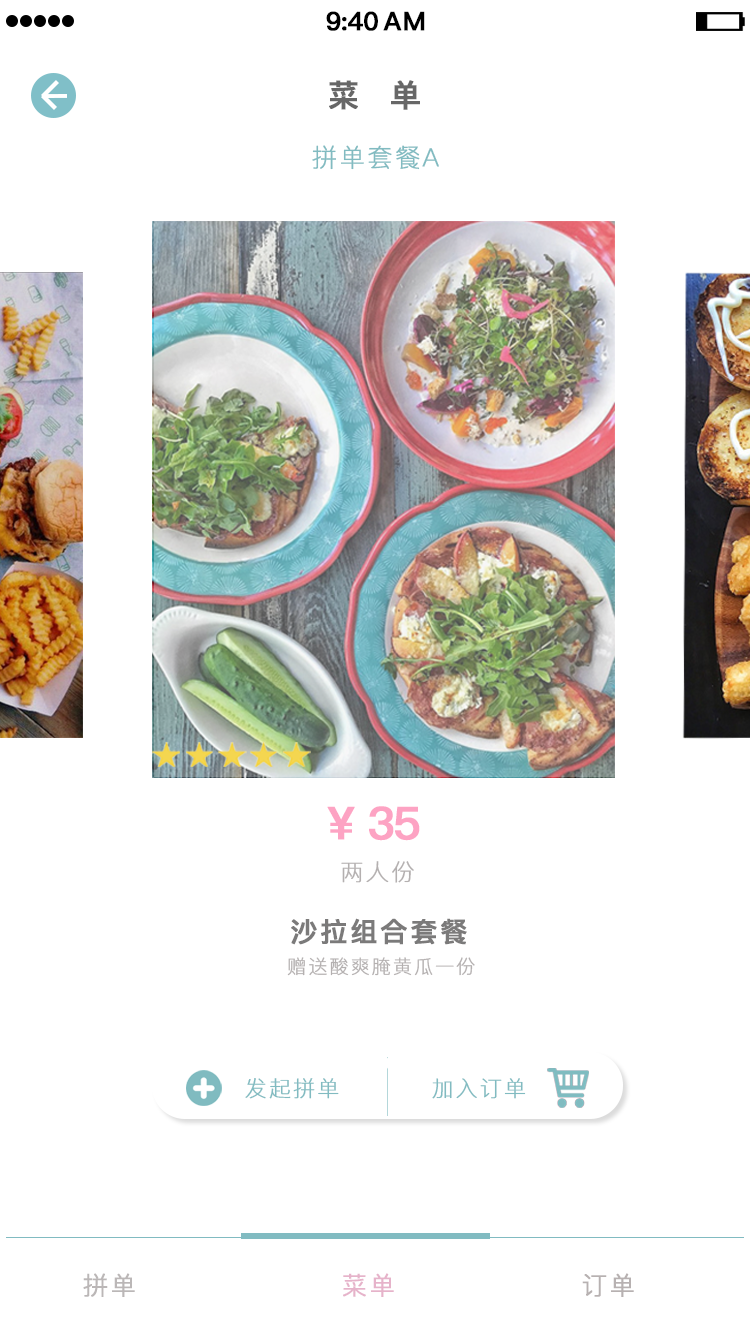
<style>
.page{position:relative;width:750px;height:1334px;background:#ffffff}
.page>*{position:absolute;margin:0}
.t1{font:25.4px "PingFang-SC-Bold";letter-spacing:-0.028em;color:#000000;font-weight:bold}
.t2{font:25.4px "PingFang-SC-Bold";letter-spacing:0.052em;color:#000000;font-weight:bold}
.t3{font:31px "PingFang-SC-Bold";letter-spacing:0.965em;color:#676767;font-weight:bold}
.t4{font:25px "PingFang-SC-Light";letter-spacing:0.085em;color:#81bbc1;font-weight:bold}
.t5{font:45px "PingFang-SC-Bold";letter-spacing:-0.048em;color:#fda3c3;font-weight:bold}
.t6{font:23px "PingFang-SC-Light";letter-spacing:0.085em;color:#b4b0b0;font-weight:bold}
.t7{font:27px "PingFang-SC-Bold";letter-spacing:0.085em;color:#7b7a7a;font-weight:bold}
.t8{font:19px "PingFang-SC-Light";letter-spacing:0.085em;color:#b4b0b0;font-weight:bold}
.t9{font:21.8px "PingFang-SC-Light";letter-spacing:0.085em;color:#81bbc1;font-weight:bold}
.t10{font:25px "PingFang-SC-Regular";letter-spacing:0.085em;color:#bbb7b7;font-weight:bold}
.t11{font:25px "PingFang-SC-Regular";letter-spacing:0.085em;color:#e6b3ca;font-weight:bold}
.t12{font:25px "PingFang-SC-Regular";letter-spacing:0.085em;color:#b7b1b1;font-weight:bold}
</style>
<div class="page">
<p class="t1" style="left:326px;top:11px;width:52px;height:20px">9:40</p>
<p class="t2" style="left:383px;top:11px;width:42px;height:20px">AM</p>
<p class="t3" style="left:329px;top:80px;width:91px;height:30px">菜单</p>
<p class="t4" style="left:312px;top:145px;width:127px;height:25px">拼单套餐A</p>
<p class="t5" style="left:327px;top:806px;width:93px;height:35px">¥ 35</p>
<p class="t6" style="left:341px;top:861px;width:73px;height:22px">两人份</p>
<p class="t7" style="left:291px;top:918px;width:176px;height:27px">沙拉组合套餐</p>
<p class="t8" style="left:287px;top:957px;width:188px;height:19px">赠送酸爽腌黄瓜一份</p>
<p class="t9" style="left:245px;top:1078px;width:94px;height:21px">发起拼单</p>
<p class="t9" style="left:432px;top:1078px;width:94px;height:21px">加入订单</p>
<p class="t10" style="left:83px;top:1273px;width:52px;height:24px">拼单</p>
<p class="t11" style="left:343px;top:1273px;width:51px;height:24px">菜单</p>
<p class="t12" style="left:582px;top:1273px;width:52px;height:24px">订单</p>
</div>
